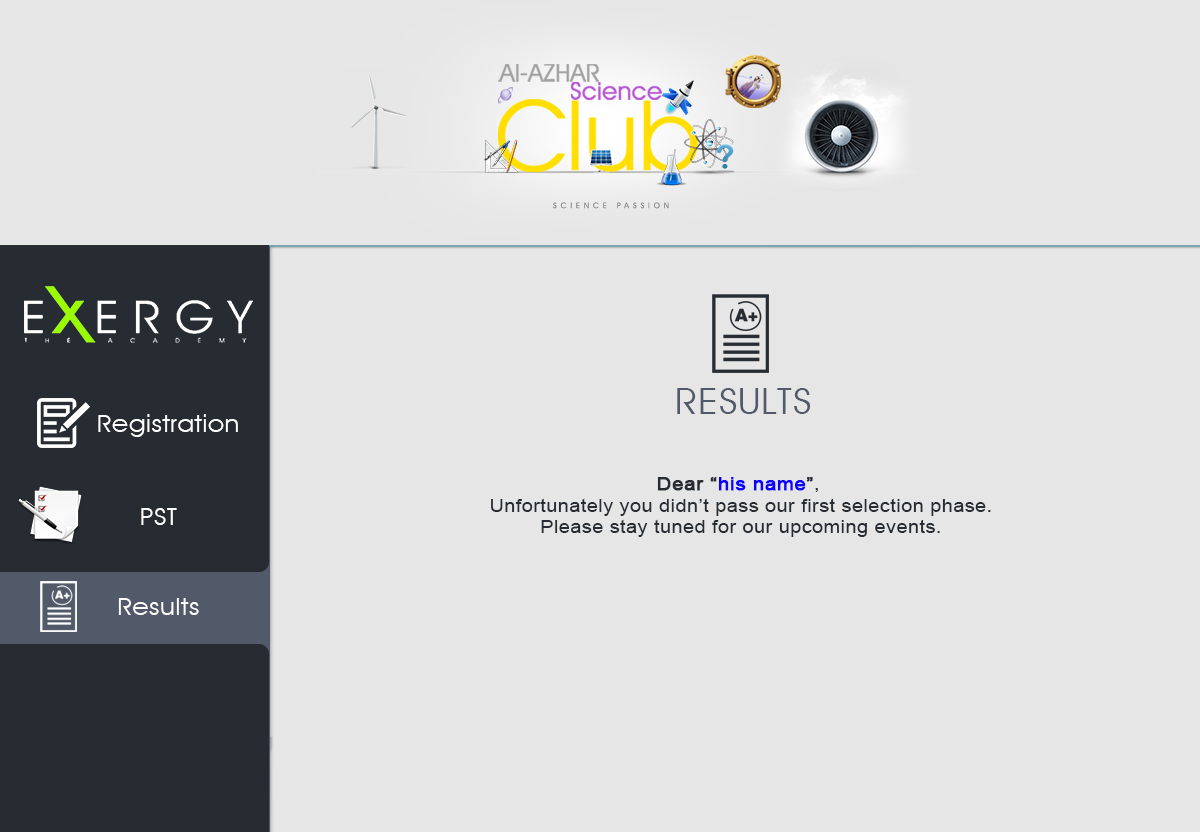
<style>
.page{position:relative;width:1200px;height:832px;background:#e6e6e6}
.page>*{position:absolute;margin:0}
.t1{font:36px "AvantGardeITCbyBT-Book";letter-spacing:0.025em;color:#525a69;text-transform:uppercase;scale:1.1 1}
.t2{font:24px "AvantGardeITCbyBT-Book";letter-spacing:0.025em;color:#ffffff;scale:1.1 1}
.t3{font:18px "ArialMT";letter-spacing:0.025em;color:#272c33;scale:1.1 1}
.t4{font:18px "ArialMT";letter-spacing:0.025em;color:#272c33;font-weight:bold;scale:1.1 1}
.t5{font:18px "ArialMT";letter-spacing:0.025em;color:#0c00ff;font-weight:bold;scale:1.1 1}
</style>
<div class="page">
<p class="t1" style="left:677px;top:388px;width:134px;height:26px">RESULTS</p>
<p class="t2" style="left:98px;top:414px;width:140px;height:23px">Registration</p>
<p class="t3" style="left:491px;top:477px;width:500px;height:60px;text-align:center"><span class="t4">Dear “</span><span class="t5">his name</span><span class="t4">”</span>, <br>Unfortunately you didn’t pass our first selection phase.<br>Please stay tuned for our upcoming events.</p>
<p class="t2" style="left:141px;top:508px;width:36px;height:17px">PST</p>
<p class="t2" style="left:118px;top:598px;width:81px;height:17px">Results</p>
</div>
